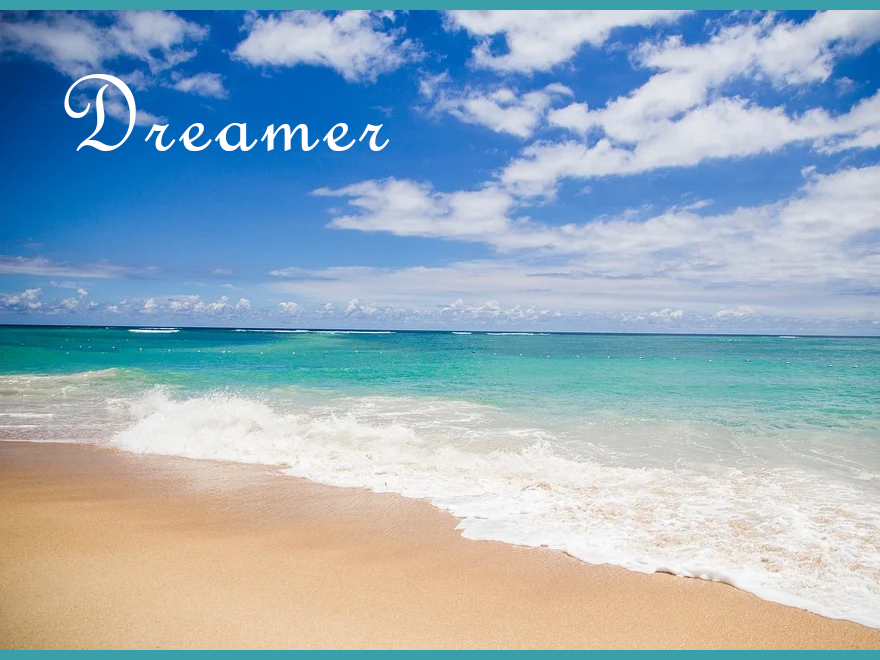
<style>
.page{position:relative;width:880px;height:660px}
.page>*{position:absolute;margin:0}
.t1{font:116.7px "FrenchScriptMT";letter-spacing:0.05em;color:#ffffff}
</style>
<div class="page">
<p class="t1" style="left:64px;top:74px;width:326px;height:77px">Dreamer</p>
</div>
